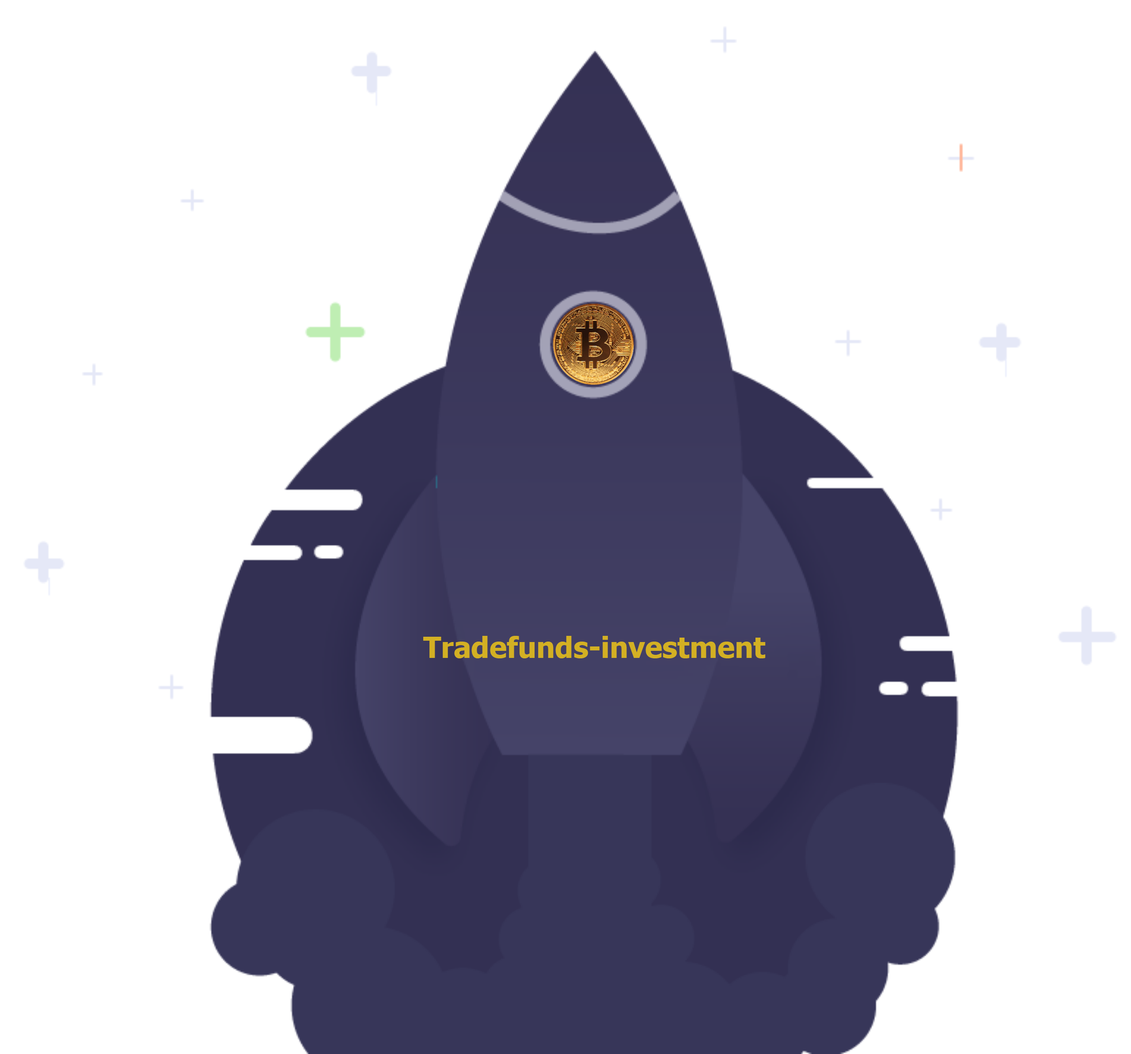
<style>
.page{position:relative;width:1131px;height:1054px;background:#ffffff}
.page>*{position:absolute;margin:0}
.t1{font:29.1px "Tahoma-Bold";color:#d3b023}
</style>
<div class="page">
<p class="t1" style="left:423px;top:636px;width:343px;height:23px">Tradefunds-investment</p>
</div>
